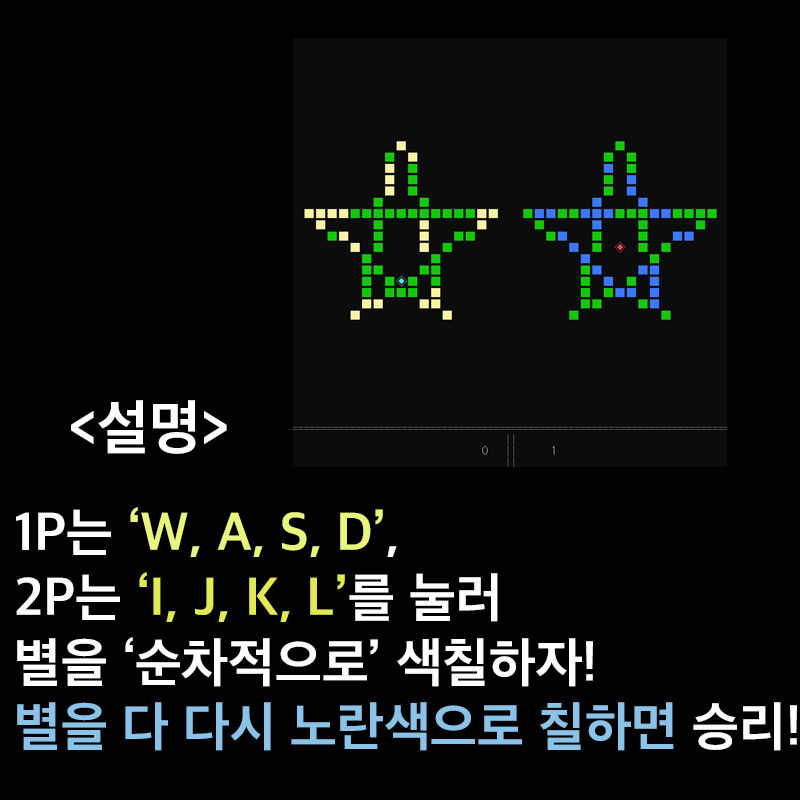
<style>
.page{position:relative;width:800px;height:800px;background:#000000}
.page>*{position:absolute;margin:0}
.t1{font:60px "AppleSDGothicNeoB00";color:#ffffff}
.t2{font:54px "AppleSDGothicNeoB00";color:#ffffff}
.t3{font:54px "AppleSDGothicNeoB00";color:#e9f67e}
.t4{font:54px "AppleSDGothicNeoB00";color:#e1ea52}
.t5{font:54px "AppleSDGothicNeoB00";color:#8ac3e7}
</style>
<div class="page">
<p class="t1" style="left:71px;top:400px;width:156px;height:54px">&lt;설명&gt;</p>
<p class="t2" style="left:16px;top:507px;width:781px;height:244px">1P는 <span class="t3">‘W, A, S, D’</span>,<br>2P는 <span class="t4">‘I, J, K, L’</span>를 눌러<br>별을 ‘순차적으로’ 색칠하자!<br><span class="t5">별을 다 다시 노란색으로 칠하면</span> 승리!</p>
</div>
